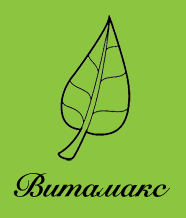
<style>
.page{position:relative;width:186px;height:218px;background:#8cc641}
.page>*{position:absolute;margin:0}
.t1{font:32px "SnellRoundhand-Bold";color:#000000}
</style>
<div class="page">
<p class="t1" style="left:13px;top:173px;width:157px;height:24px">Витамакс</p>
</div>
